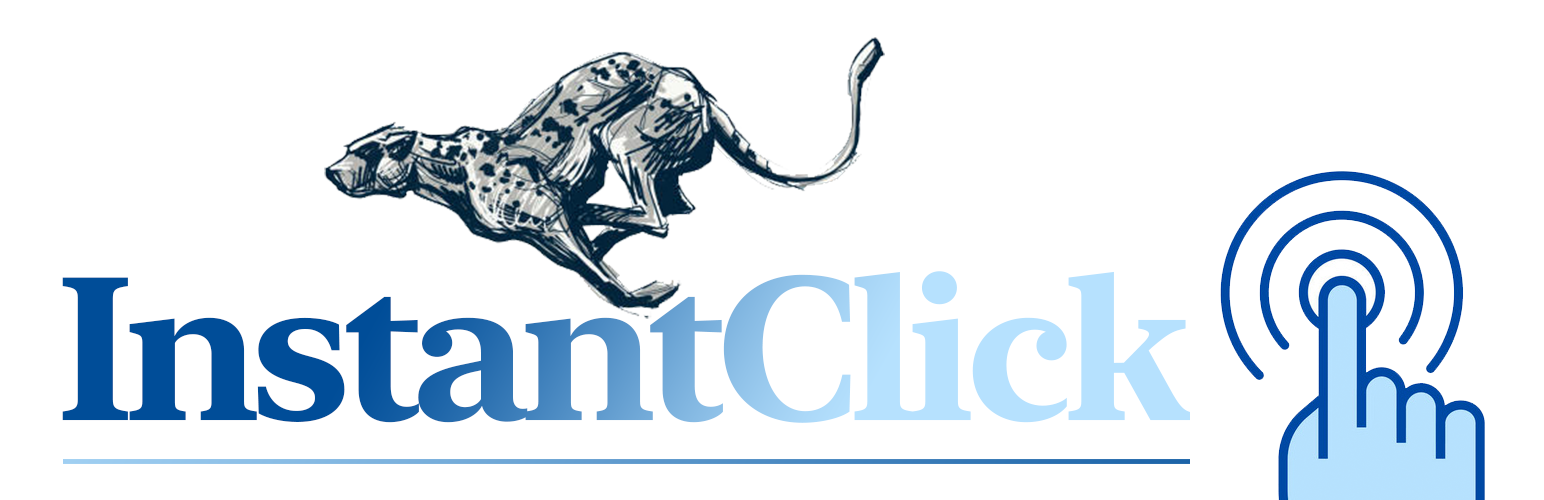
<style>
.page{position:relative;width:1544px;height:500px;background:#ffffff}
.page>*{position:absolute;margin:0}
.t1{font:202px "NewYorkMedium-Bold";letter-spacing:-0.05em}
</style>
<div class="page">
<p class="t1" style="left:62px;top:271px;width:1128px;height:152px">InstantClick</p>
</div>
